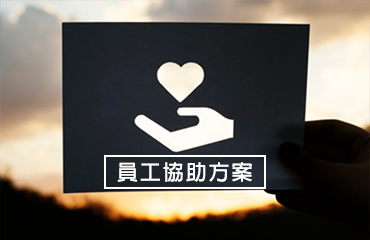
<style>
.page{position:relative;width:370px;height:240px}
.page>*{position:absolute;margin:0}
.t1{font:20.8px "AdobeFanHeitiStd-Bold";letter-spacing:0.1em;color:#ffffff}
</style>
<div class="page">
<p class="t1" style="left:117px;top:162px;width:135px;height:20px">員工協助方案</p>
</div>
